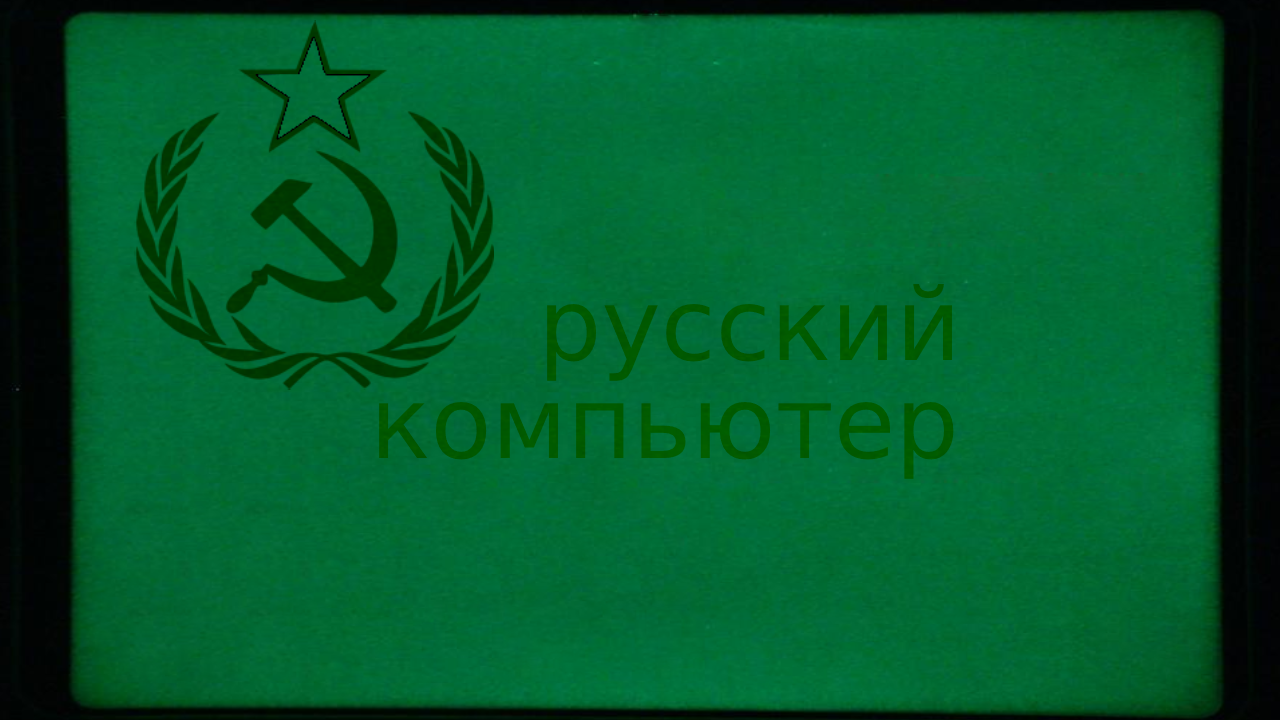
<style>
.page{position:relative;width:1280px;height:720px}
.page>*{position:absolute;margin:0}
.t1{font:100px "DejaVuSans";color:#005900}
.t2{font:100px "DejaVuSans";color:#005a00}
</style>
<div class="page">
<p class="t1" style="left:547px;top:284px;width:405px;height:97px">русский</p>
<p class="t2" style="left:379px;top:401px;width:575px;height:78px">компьютер</p>
</div>
